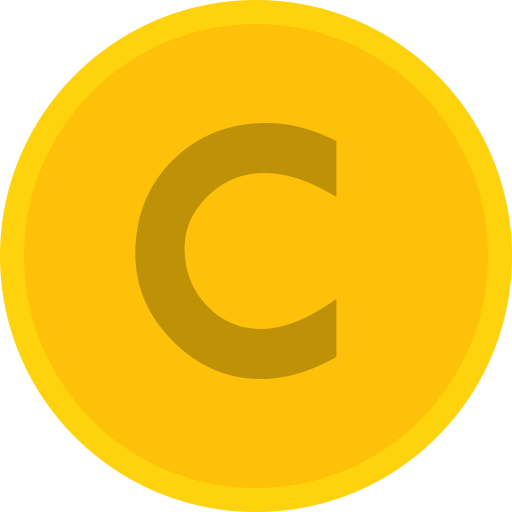
<style>
.page{position:relative;width:512px;height:512px;background:#fec10a}
.page>*{position:absolute;margin:0}
.t1{font:600px "TwCenMT-Regular";letter-spacing:-0.025em;color:#be9107}
</style>
<div class="page">
<p class="t1" style="left:135px;top:123px;width:202px;height:256px">c</p>
</div>
